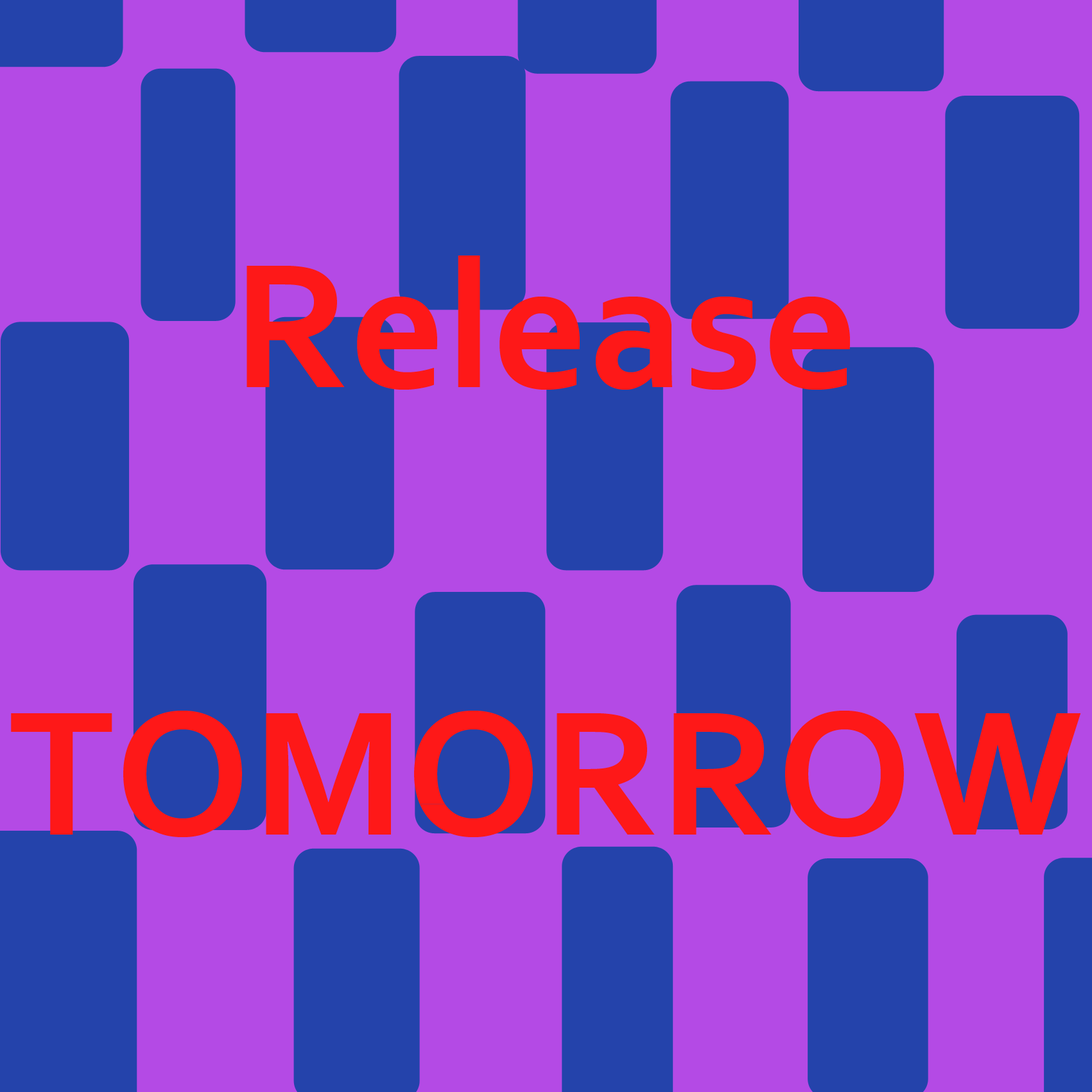
<style>
.page{position:relative;width:1092px;height:1092px;background:#b44ae5}
.page>*{position:absolute;margin:0}
.t1{font:186.4px "Corbel-Bold";color:#fe1818}
</style>
<div class="page">
<p class="t1" style="left:11px;top:256px;width:1070px;height:581px;text-align:center">Release<br><br>TOMORROW</p>
</div>
